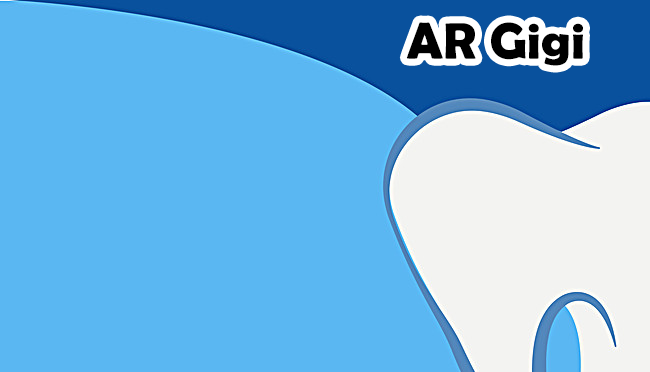
<style>
.page{position:relative;width:650px;height:372px;background:#5ab7f2}
.page>*{position:absolute;margin:0}
.t1{font:51.6px "BerlinSansFBDemi-Bold";color:#000000}
</style>
<div class="page">
<p class="t1" style="left:406px;top:22px;width:177px;height:44px">AR Gigi</p>
</div>
